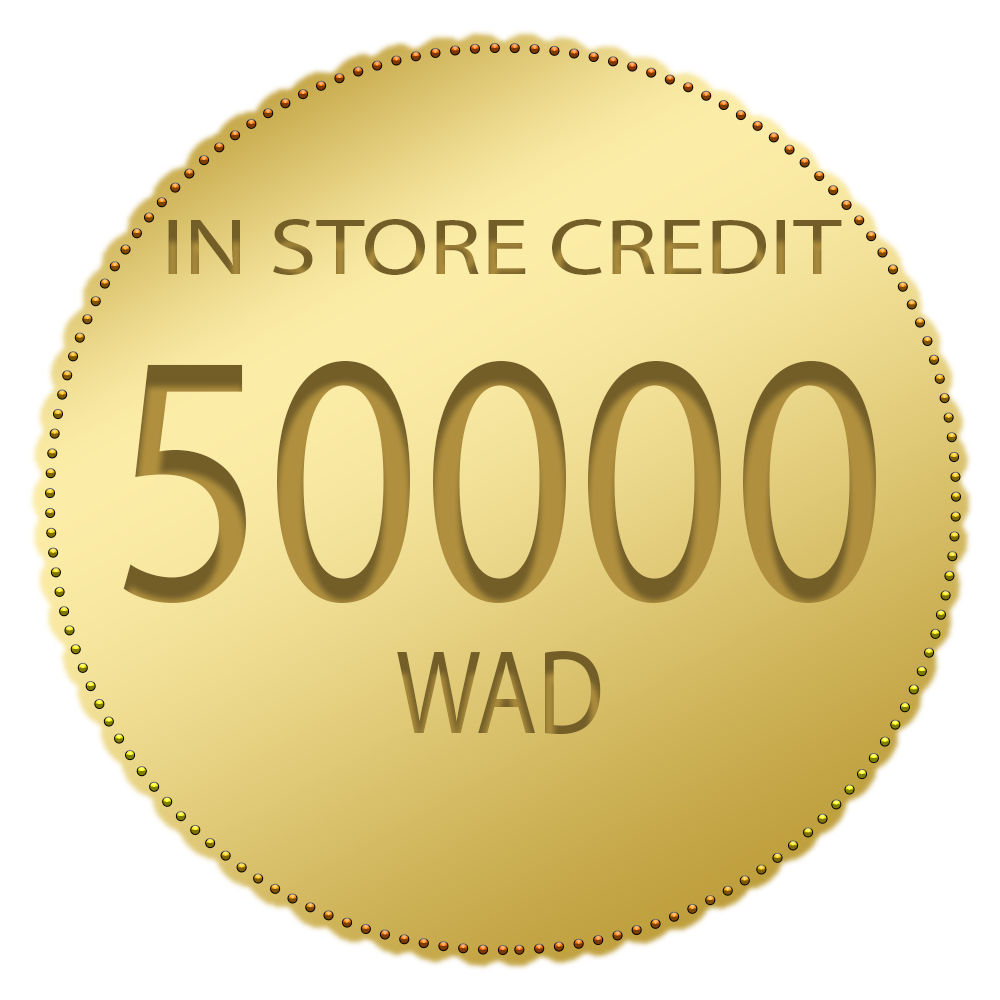
<style>
.page{position:relative;width:1000px;height:1000px;background:#ffffff}
.page>*{position:absolute;margin:0}
.t1{font:80px "MyriadPro-Regular";scale:1.21 1}
.t2{font:360.4px "MyriadPro-Regular";scale:0.84 1}
.t3{font:120px "MyriadPro-Regular";color:#826a2e;scale:0.84 1}
</style>
<div class="page">
<p class="t1" style="left:168px;top:219px;width:674px;height:56px">IN STORE CREDIT</p>
<p class="t2" style="left:123px;top:361px;width:753px;height:242px">50000</p>
<p class="t3" style="left:397px;top:651px;width:204px;height:84px">WAD</p>
</div>
